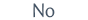
<style>
.page{position:relative;width:88px;height:20px;background:#ffffff}
.page>*{position:absolute;margin:0}
.t1{font:19.8px "Amira-Roman";color:#445566;scale:0.91 1}
</style>
<div class="page">
<p class="t1" style="left:33px;top:3px;width:22px;height:15px">No</p>
</div>
